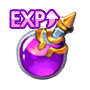
<style>
.page{position:relative;width:90px;height:90px;background:#ffffff}
.page>*{position:absolute;margin:0}
.t1{font:20px "JejuGothic";letter-spacing:-0.05em;font-weight:bold}
</style>
<div class="page">
<p class="t1" style="left:11px;top:11px;width:34px;height:16px">EXP</p>
</div>
